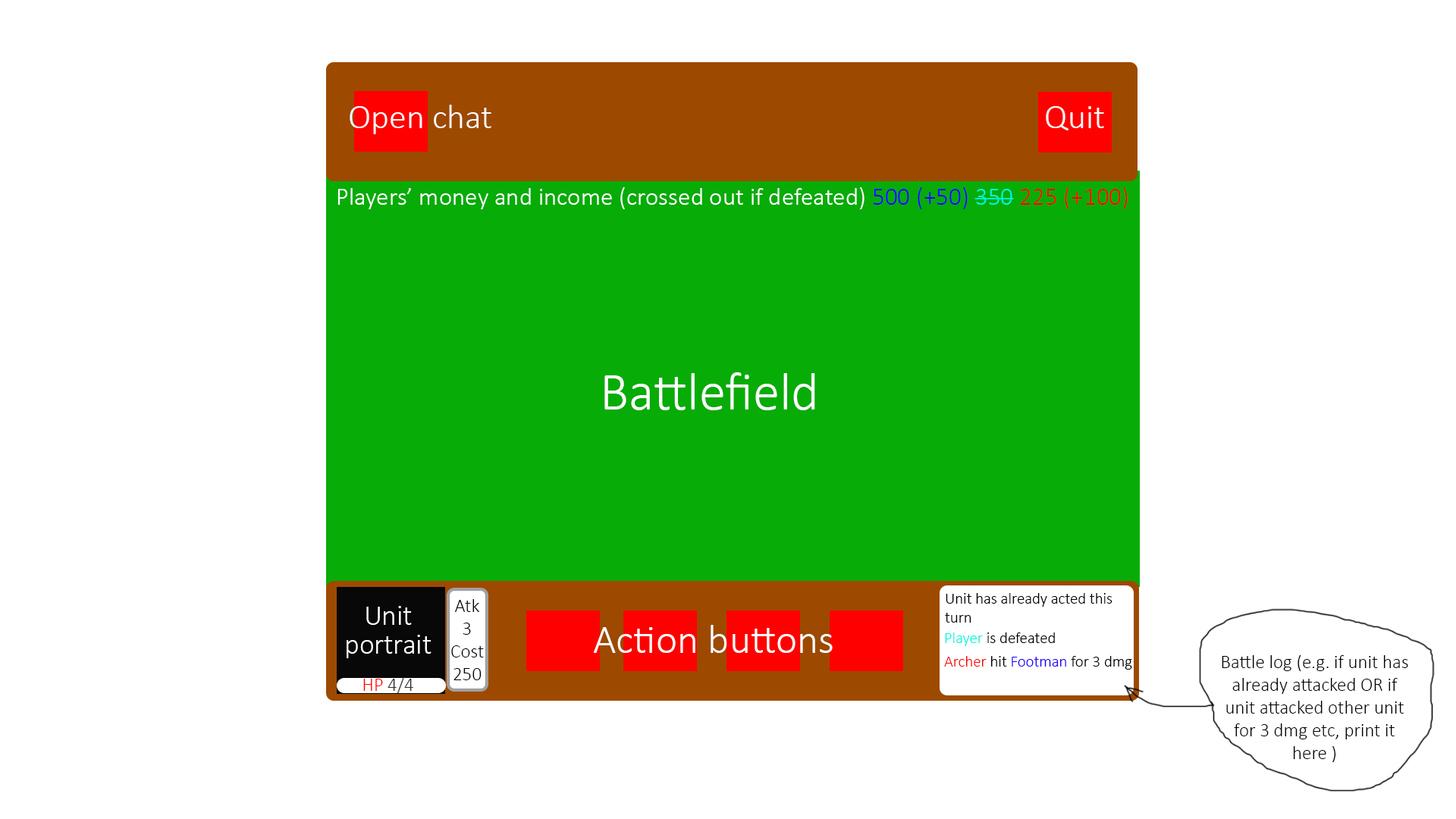
<style>
.page{position:relative;width:1456px;height:819px;background:#ffffff}
.page>*{position:absolute;margin:0}
.t1{font:34.8px "Calibri-Light";color:#ffffff}
.t2{font:25.3px "Calibri-Light";color:#ffffff}
.t3{font:25.3px "Calibri-Light";color:#1e00ff}
.t4{font:25.3px "Calibri-Light";color:#00f5db}
.t5{font:25.3px "Calibri-Light";color:#ff0000}
.t6{font:53.7px "Calibri-Light";color:#ffffff}
.t7{font:15.8px "Calibri-Light";color:#000000}
.t8{font:28.4px/28.4px "Calibri-Light";color:#ffffff}
.t9{font:19px "Calibri-Light";color:#000000}
.t10{font:41.1px "Calibri-Light";color:#ffffff}
.t11{font:15.8px "Calibri-Light";color:#00f5db}
.t12{font:15.8px "Calibri-Light";color:#ff0000}
.t13{font:15.8px "Calibri-Light";color:#1e00ff}
.t14{font:19px "Calibri-Light";color:#333333}
.t15{font:19px "Calibri-Light";color:#ff0000}
</style>
<div class="page">
<p class="t1" style="left:350px;top:105px;width:141px;height:29px">Open chat</p>
<p class="t1" style="left:1046px;top:106px;width:58px;height:24px">Quit</p>
<p class="t2" style="left:337px;top:187px;width:791px;height:22px">Players’ money and income (crossed out if defeated) <span class="t3">500 (+50) </span><span class="t4">350 </span><span class="t5">225 (+100)</span></p>
<p class="t6" style="left:604px;top:372px;width:211px;height:38px">Battlefield</p>
<p class="t7" style="left:945px;top:593px;width:167px;height:30px">Unit has already acted this turn</p>
<p class="t8" style="left:347px;top:606px;width:84px;height:52px;text-align:center">Unit portrait</p>
<p class="t9" style="left:451px;top:599px;width:33px;height:81px;text-align:center">Atk<br>3<br>Cost<br>250</p>
<p class="t10" style="left:594px;top:625px;width:239px;height:28px">Action buttons</p>
<p class="t7" style="left:945px;top:632px;width:110px;height:14px"><span class="t11">Player </span>is defeated</p>
<p class="t7" style="left:944px;top:656px;width:188px;height:14px"><span class="t12">Archer </span>hit <span class="t13">Footman </span>for 3 dmg</p>
<p class="t9" style="left:1222px;top:655px;width:186px;height:107px;text-align:center">Battle log (e.g. if unit has already attacked OR if unit attacked other unit for 3 dmg etc, print it here )</p>
<p class="t14" style="left:363px;top:677px;width:50px;height:16px"><span class="t15">HP </span>4/4</p>
</div>
